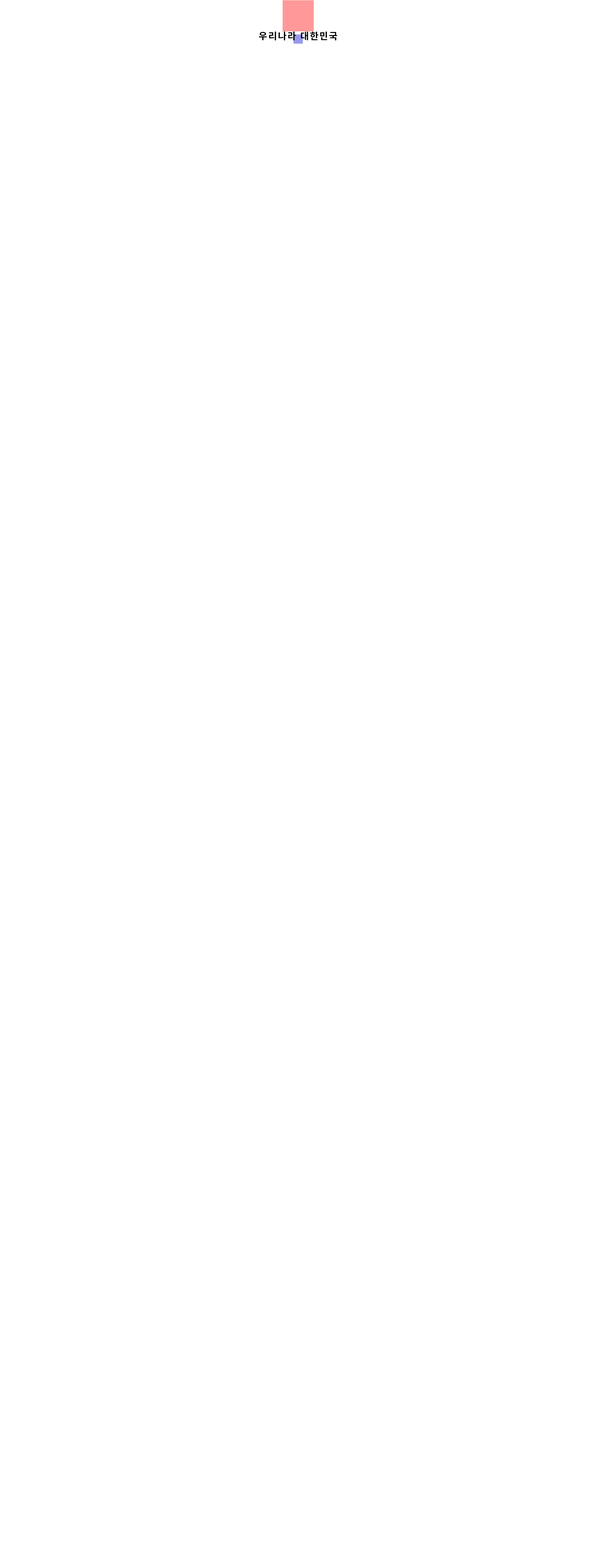
<style>
.page{position:relative;width:596px;height:1568px;background:#ffffff}
.page>*{position:absolute;margin:0}
.t1{font:9.4px "NotoSansKR-Bold";letter-spacing:0.1em;color:#000000}
</style>
<div class="page">
<p class="t1" style="left:259px;top:31px;width:78px;height:9px">우리나라 대한민국</p>
</div>
